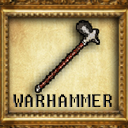
<style>
.page{position:relative;width:128px;height:128px}
.page>*{position:absolute;margin:0}
.t1{font:18px "Fixedsys"}
</style>
<div class="page">
<p class="t1" style="left:13px;top:94px;width:99px;height:13px">WARHAMMER</p>
</div>
